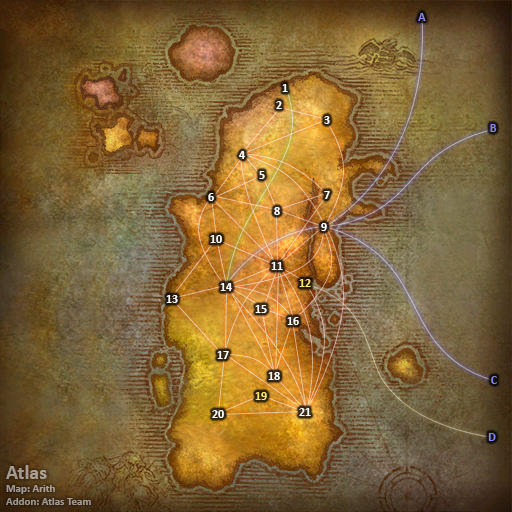
<style>
.page{position:relative;width:512px;height:512px}
.page>*{position:absolute;margin:0}
.t1{font:12px "Calibri-Bold";color:#8788ee}
.t2{font:12px "Calibri-Bold";color:#ffffff}
.t3{font:12px "Calibri-Bold";color:#fee570}
.t4{font:11px "Calibri-Bold";color:#a49b92}
.t5{font:20px "Calibri-Bold";color:#a49b92}
</style>
<div class="page">
<p class="t1" style="left:418px;top:13px;width:8px;height:8px">A</p>
<p class="t2" style="left:282px;top:84px;width:6px;height:8px">1</p>
<p class="t2" style="left:276px;top:101px;width:6px;height:8px">2</p>
<p class="t2" style="left:324px;top:116px;width:6px;height:8px">3</p>
<p class="t1" style="left:490px;top:124px;width:7px;height:8px">B</p>
<p class="t2" style="left:239px;top:151px;width:6px;height:8px">4</p>
<p class="t2" style="left:259px;top:171px;width:6px;height:8px">5</p>
<p class="t2" style="left:208px;top:193px;width:6px;height:8px">6</p>
<p class="t2" style="left:324px;top:191px;width:6px;height:8px">7</p>
<p class="t2" style="left:274px;top:207px;width:6px;height:8px">8</p>
<p class="t2" style="left:321px;top:223px;width:6px;height:8px">9</p>
<p class="t2" style="left:210px;top:235px;width:12px;height:8px">10</p>
<p class="t2" style="left:271px;top:262px;width:12px;height:8px">11</p>
<p class="t3" style="left:299px;top:279px;width:12px;height:8px">12</p>
<p class="t2" style="left:220px;top:283px;width:12px;height:8px">14</p>
<p class="t2" style="left:166px;top:295px;width:12px;height:8px">13</p>
<p class="t2" style="left:255px;top:305px;width:12px;height:8px">15</p>
<p class="t2" style="left:287px;top:317px;width:12px;height:8px">16</p>
<p class="t2" style="left:217px;top:351px;width:12px;height:8px">17</p>
<p class="t2" style="left:268px;top:372px;width:12px;height:8px">18</p>
<p class="t1" style="left:491px;top:376px;width:6px;height:8px">C</p>
<p class="t3" style="left:255px;top:392px;width:12px;height:8px">19</p>
<p class="t2" style="left:212px;top:410px;width:12px;height:8px">20</p>
<p class="t2" style="left:299px;top:408px;width:12px;height:8px">21</p>
<p class="t1" style="left:488px;top:433px;width:8px;height:8px">D</p>
<p class="t4" style="left:6px;top:465px;width:85px;height:40px"><span class="t5">Atlas<br></span>Map: Arith<br>Addon: Atlas Team</p>
</div>
